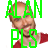
<style>
.page{position:relative;width:48px;height:48px;background:#ffffff}
.page>*{position:absolute;margin:0}
.t1{font:24.8px "AgencyFB-Reg";color:#10ff04}
</style>
<div class="page">
<p class="t1" style="left:5px;top:0px;width:37px;height:48px;text-align:center">ALAN<br>PLS</p>
</div>
